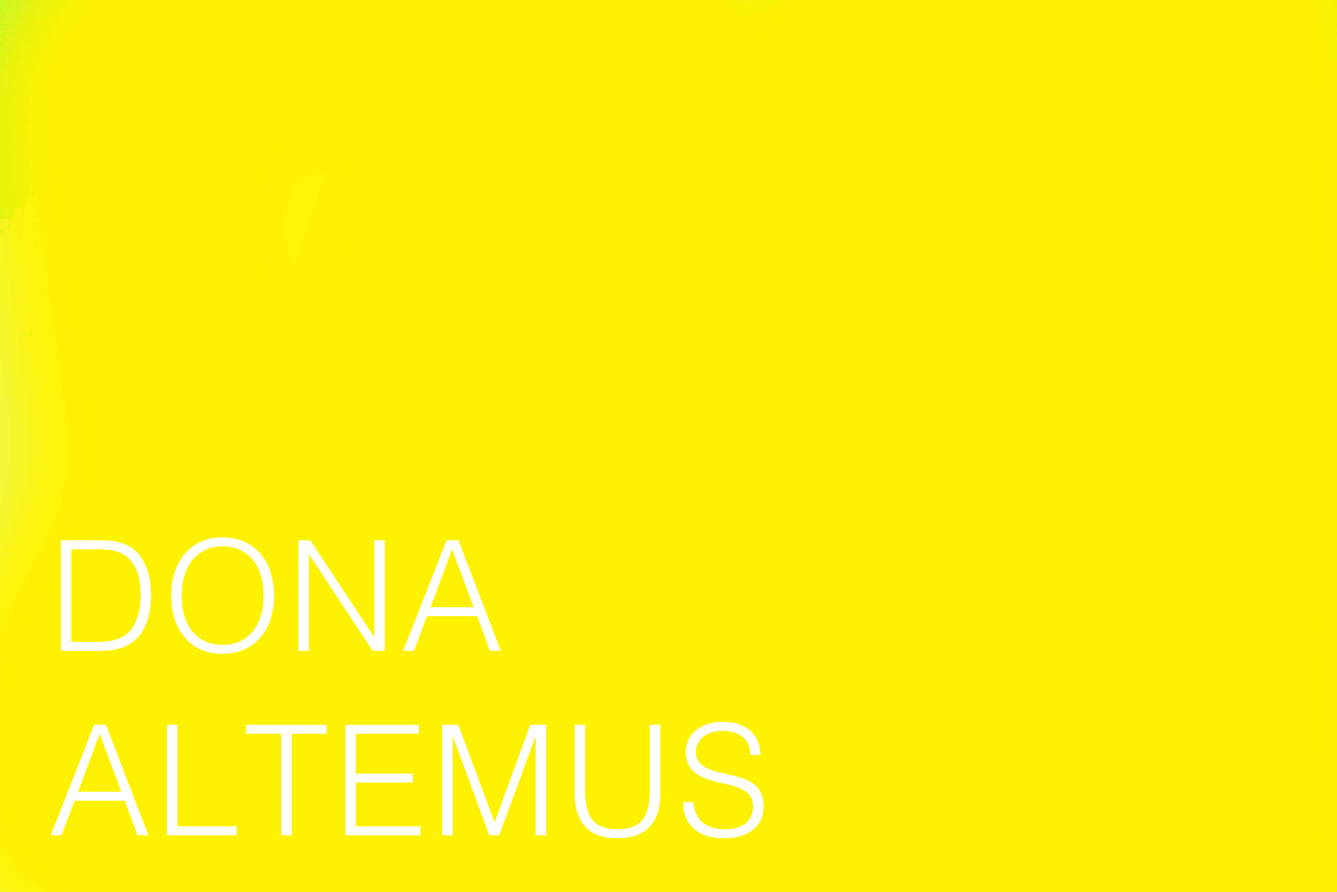
<style>
.page{position:relative;width:1337px;height:892px;background:#fef200}
.page>*{position:absolute;margin:0}
.t1{font:153.5px "Helvetica-Light";letter-spacing:0.025em;color:#ffffff}
</style>
<div class="page">
<p class="t1" style="left:51px;top:537px;width:713px;height:301px">DONA <br>ALTEMUS</p>
</div>
